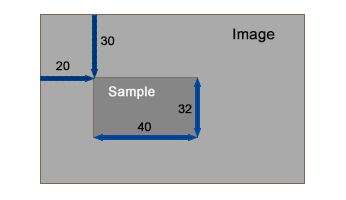
<style>
.page{position:relative;width:346px;height:200px;background:#aaaaaa}
.page>*{position:absolute;margin:0}
.t1{font:14.7px "ArialMT";color:#000000;font-weight:bold}
.t2{font:12px "ArialMT";color:#000000;font-weight:bold}
.t3{font:13.3px "ArialMT";color:#fefefe;font-weight:bold}
</style>
<div class="page">
<p class="t1" style="left:233px;top:28px;width:42px;height:15px;opacity:0.96">Image</p>
<p class="t2" style="left:101px;top:36px;width:14px;height:10px">30</p>
<p class="t2" style="left:56px;top:61px;width:14px;height:10px">20</p>
<p class="t3" style="left:108px;top:86px;width:47px;height:13px;opacity:0.89">Sample</p>
<p class="t2" style="left:178px;top:104px;width:14px;height:10px">32</p>
<p class="t2" style="left:137px;top:122px;width:14px;height:10px">40</p>
</div>
